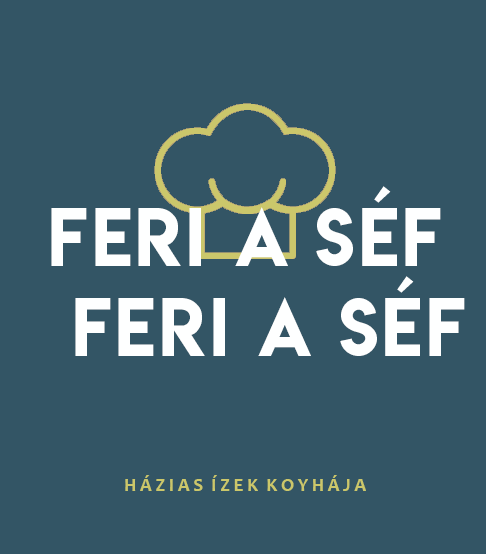
<style>
.page{position:relative;width:486px;height:554px;background:#335565}
.page>*{position:absolute;margin:0}
.t1{font:73.3px "LemonMilk";letter-spacing:0.05em;color:#feffff}
.t2{font:18.7px "Candara-Bold";letter-spacing:0.2em;color:#cbc76a}
</style>
<div class="page">
<p class="t1" style="left:51px;top:186px;width:390px;height:80px">FERI A SÉF</p>
<p class="t1" style="left:75px;top:276px;width:390px;height:80px">FERI A SÉF</p>
<p class="t2" style="left:125px;top:475px;width:241px;height:16px">HÁZIAS ÍZEK KOYHÁJA</p>
</div>
